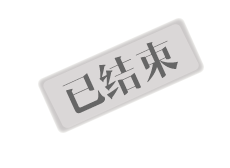
<style>
.page{position:relative;width:230px;height:168px;background:#ffffff}
.page>*{position:absolute;margin:0}
.t1{font:40.6px "MFShangYa_Noncommercial-Regular";color:#666666}
</style>
<div class="page">
<p class="t1" style="left:62px;top:40px;width:116px;height:74px;rotate:-24deg">已结束</p>
</div>
